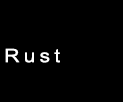
<style>
.page{position:relative;width:123px;height:102px;background:#000000}
.page>*{position:absolute;margin:0}
.t1{font:18.5px "ArialMT";letter-spacing:0.2em;color:#ffffff;scale:1.14 1}
</style>
<div class="page">
<p class="t1" style="left:5px;top:48px;width:55px;height:15px">Rust</p>
</div>
